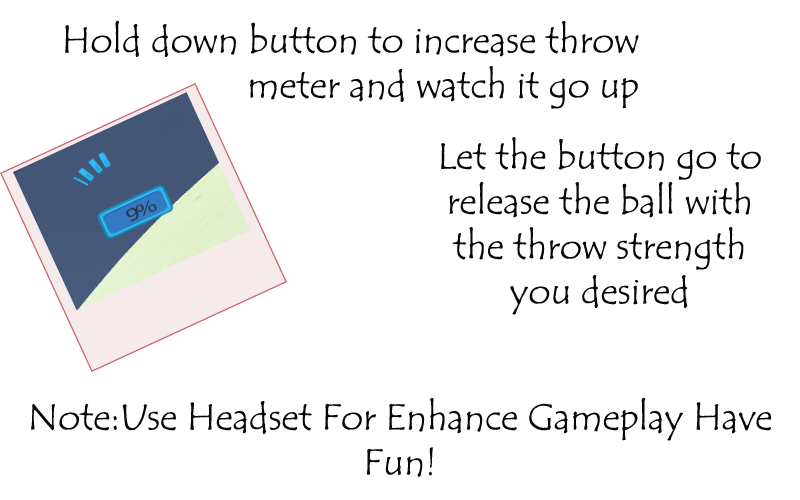
<style>
.page{position:relative;width:800px;height:500px;background:#ffffff}
.page>*{position:absolute;margin:0}
.t1{font:37.5px "TempusSansITC";color:#080707}
</style>
<div class="page">
<p class="t1" style="left:65px;top:20px;width:574px;height:89px;text-align:right">Hold down button to increase throw meter and watch it go up</p>
<p class="t1" style="left:441px;top:137px;width:320px;height:178px;text-align:center">Let the button go to release the ball with the throw strength you desired</p>
<p class="t1" style="left:31px;top:397px;width:741px;height:80px;text-align:center">Note:Use Headset For Enhance Gameplay Have Fun!</p>
</div>
